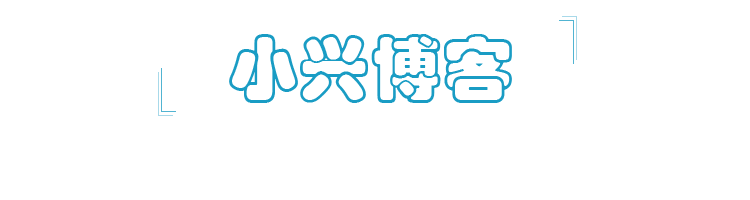
<style>
.page{position:relative;width:750px;height:200px;background:#ffffff}
.page>*{position:absolute;margin:0}
.t1{font:72px "STCaiyun";color:#199cc4}
</style>
<div class="page">
<p class="t1" style="left:229px;top:34px;width:283px;height:69px">小兴博客</p>
</div>
